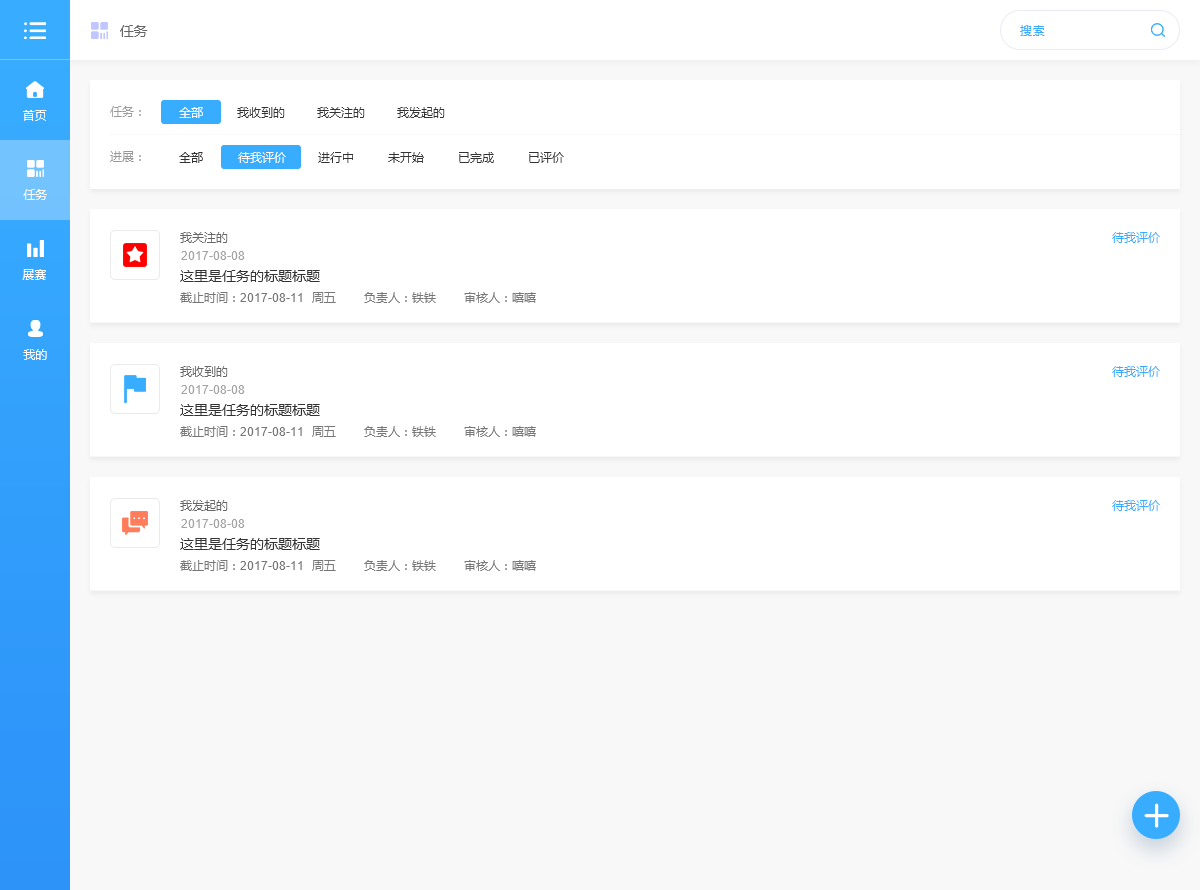
<style>
.page{position:relative;width:1200px;height:890px;background:#ffffff}
.page>*{position:absolute;margin:0}
.t1{font:14px "MicrosoftYaHei";color:#666666}
.t2{font:12px "MicrosoftYaHei";letter-spacing:0.05em;color:#38adff}
.t3{font:12px "MicrosoftYaHei";color:#ffffff}
.t4{font:12px "MicrosoftYaHei";color:#999999}
.t5{font:12px "MicrosoftYaHei";color:#333333}
.t6{font:12px "MicrosoftYaHei";color:#666666}
.t7{font:12px "MicrosoftYaHei";color:#38adff}
.t8{font:12px "ArialMT";color:#a3a3a3}
.t9{font:14px "MicrosoftYaHei";color:#333333}
.t10{font:12px "MicrosoftYaHei";color:#777777}
.t11{font:12px "ArialMT";color:#777777}
</style>
<div class="page">
<p class="t1" style="left:120px;top:25px;width:28px;height:12px">任务</p>
<p class="t2" style="left:1020px;top:25px;width:25px;height:11px">搜索</p>
<p class="t3" style="left:23px;top:110px;width:24px;height:11px">首页</p>
<p class="t4" style="left:110px;top:106px;width:31px;height:11px">任务：</p>
<p class="t3" style="left:179px;top:107px;width:24px;height:11px">全部</p>
<p class="t5" style="left:237px;top:107px;width:48px;height:11px">我收到的</p>
<p class="t5" style="left:317px;top:107px;width:48px;height:11px">我关注的</p>
<p class="t5" style="left:397px;top:107px;width:48px;height:11px">我发起的</p>
<p class="t4" style="left:110px;top:151px;width:31px;height:11px">进展：</p>
<p class="t5" style="left:179px;top:152px;width:24px;height:11px">全部</p>
<p class="t3" style="left:238px;top:152px;width:48px;height:11px">待我评价</p>
<p class="t5" style="left:318px;top:152px;width:35px;height:11px">进行中</p>
<p class="t5" style="left:388px;top:152px;width:36px;height:11px">未开始</p>
<p class="t5" style="left:459px;top:152px;width:35px;height:11px">已完成</p>
<p class="t5" style="left:529px;top:152px;width:35px;height:11px">已评价</p>
<p class="t3" style="left:23px;top:189px;width:24px;height:11px">任务</p>
<p class="t6" style="left:180px;top:232px;width:48px;height:11px">我关注的</p>
<p class="t7" style="left:1112px;top:232px;width:48px;height:11px">待我评价</p>
<p class="t8" style="left:181px;top:251px;width:64px;height:9px">2017-08-08</p>
<p class="t3" style="left:22px;top:269px;width:24px;height:11px">展赛</p>
<p class="t9" style="left:180px;top:270px;width:140px;height:12px">这里是任务的标题标题</p>
<p class="t10" style="left:180px;top:292px;width:356px;height:11px">截止时间：<span class="t11">2017-08-11</span>  周五       负责人：铁铁       审核人：嘻嘻</p>
<p class="t3" style="left:23px;top:349px;width:24px;height:11px">我的</p>
<p class="t6" style="left:180px;top:366px;width:48px;height:11px">我收到的</p>
<p class="t7" style="left:1112px;top:366px;width:48px;height:11px">待我评价</p>
<p class="t8" style="left:181px;top:385px;width:64px;height:9px">2017-08-08</p>
<p class="t9" style="left:180px;top:404px;width:140px;height:12px">这里是任务的标题标题</p>
<p class="t10" style="left:180px;top:426px;width:356px;height:11px">截止时间：<span class="t11">2017-08-11</span>  周五       负责人：铁铁       审核人：嘻嘻</p>
<p class="t6" style="left:180px;top:500px;width:48px;height:11px">我发起的</p>
<p class="t7" style="left:1112px;top:500px;width:48px;height:11px">待我评价</p>
<p class="t8" style="left:181px;top:519px;width:64px;height:9px">2017-08-08</p>
<p class="t9" style="left:180px;top:538px;width:140px;height:12px">这里是任务的标题标题</p>
<p class="t10" style="left:180px;top:560px;width:356px;height:11px">截止时间：<span class="t11">2017-08-11</span>  周五       负责人：铁铁       审核人：嘻嘻</p>
</div>
